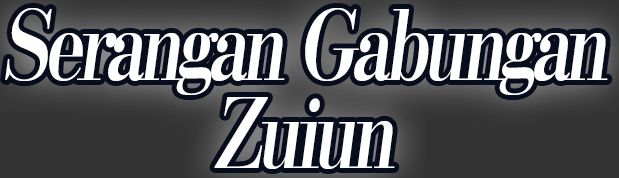
<style>
.page{position:relative;width:619px;height:178px;background:#070d1d}
.page>*{position:absolute;margin:0}
.t1{font:96px/88px "KochoStd-Heavy";letter-spacing:-0.08em;color:#ffffff;font-style:italic;scale:0.75 1}
</style>
<div class="page">
<p class="t1" style="left:5px;top:8px;width:603px;height:161px;text-align:center">Serangan Gabungan<br>Zuiun</p>
</div>
